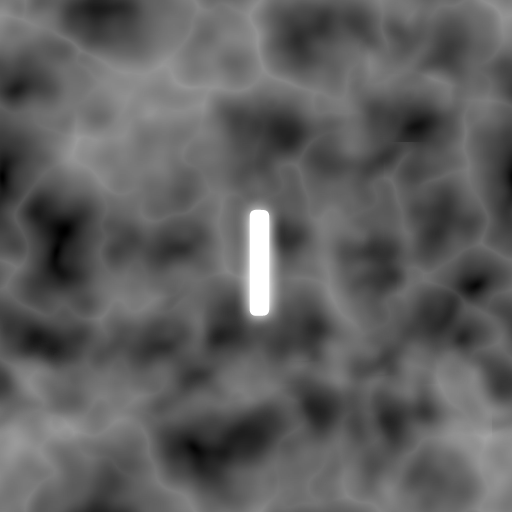
<style>
.page{position:relative;width:512px;height:512px}
.page>*{position:absolute;margin:0}
.t1{font:177.8px "Neuropol";color:#ffffff}
</style>
<div class="page">
<p class="t1" style="left:249px;top:209px;width:21px;height:107px">1</p>
</div>
